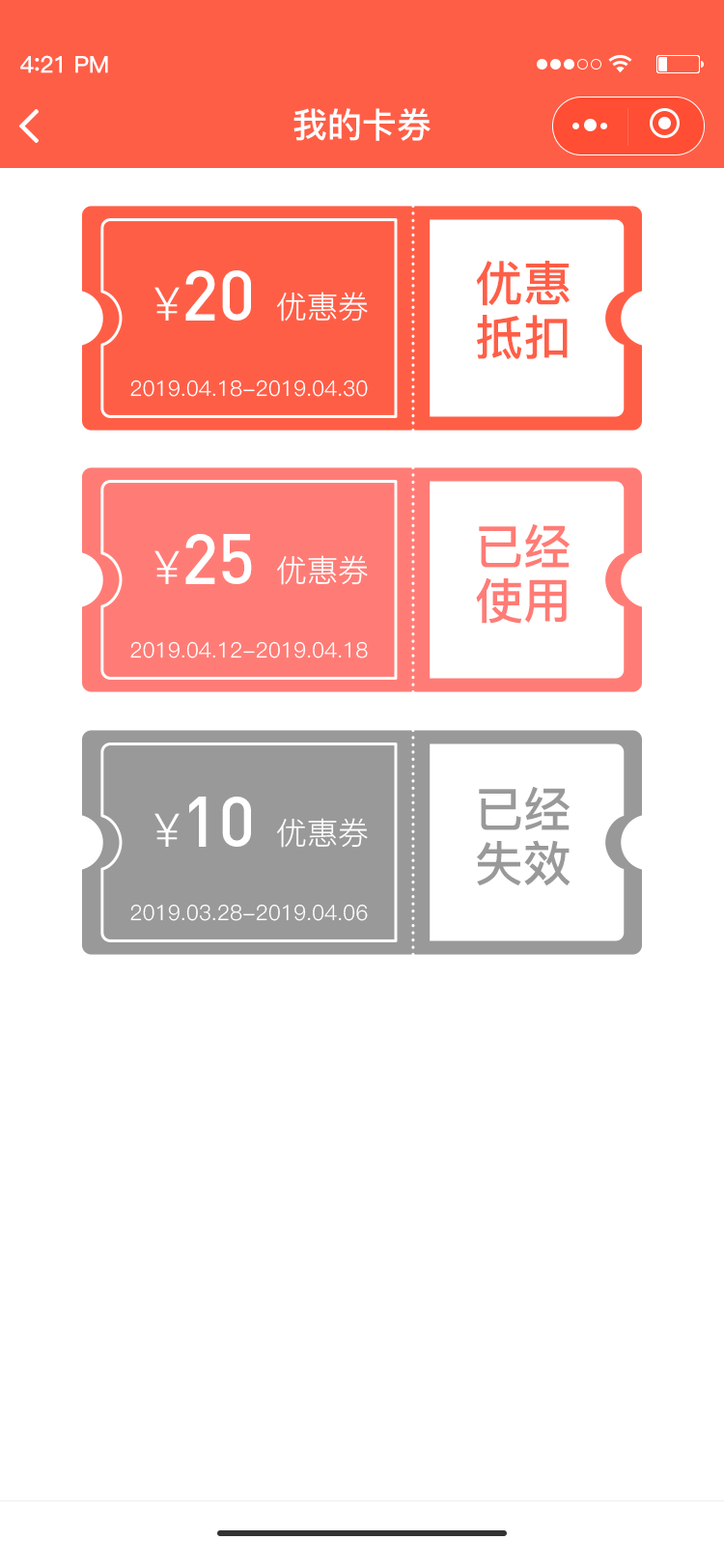
<style>
.page{position:relative;width:724px;height:1568px;background:#ffffff}
.page>*{position:absolute;margin:0}
.t1{font:23.2px "PingFang-SC-Bold";letter-spacing:-0.02em;color:#fefefe}
.t2{font:25.1px "PingFang-SC-Bold";letter-spacing:-0.02em;color:#fefefe}
.t3{font:34.8px "PingFang-SC-Bold";color:#ffffff}
.t4{font:48.3px "PingFang-SC-Bold";color:#ff5e46}
.t5{font:69.5px "DIN-Medium";color:#ffffff}
.t6{font:46.3px "PingFang-SC-Regular";color:#ffffff}
.t7{font:30.9px "PingFang-SC-Regular";color:#ffffff}
.t8{font:21.2px "PingFang-SC-Regular";color:#ffffff}
.t9{font:48.3px "PingFang-SC-Bold";color:#ff7c76}
.t10{font:48.3px "PingFang-SC-Bold";color:#999999}
</style>
<div class="page">
<p class="t1" style="left:20px;top:55px;width:88px;height:18px">4<span class="t2">:</span>21 PM</p>
<p class="t3" style="left:294px;top:108px;width:137px;height:33px">我的卡券</p>
<p class="t4" style="left:476px;top:261px;width:94px;height:99px;text-align:center">优惠<br>抵扣</p>
<p class="t5" style="left:154px;top:270px;width:97px;height:51px"><span class="t6">￥</span>20</p>
<p class="t7" style="left:277px;top:292px;width:91px;height:30px">优惠券</p>
<p class="t8" style="left:130px;top:379px;width:238px;height:18px">2019.04.18-2019.04.30</p>
<p class="t5" style="left:154px;top:534px;width:98px;height:50px"><span class="t6">￥</span>25</p>
<p class="t9" style="left:476px;top:523px;width:94px;height:101px;text-align:center">已经<br>使用</p>
<p class="t7" style="left:277px;top:555px;width:91px;height:30px">优惠券</p>
<p class="t8" style="left:130px;top:641px;width:238px;height:17px">2019.04.12-2019.04.18</p>
<p class="t10" style="left:477px;top:786px;width:94px;height:100px;text-align:center">已经<br>失效</p>
<p class="t5" style="left:154px;top:797px;width:97px;height:50px"><span class="t6">￥</span>10</p>
<p class="t7" style="left:277px;top:818px;width:91px;height:30px">优惠券</p>
<p class="t8" style="left:130px;top:904px;width:238px;height:17px">2019.03.28-2019.04.06</p>
</div>
